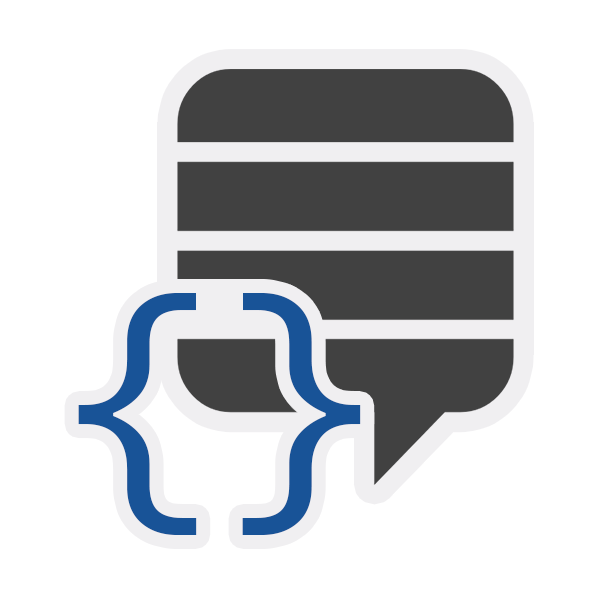
<style>
.page{position:relative;width:600px;height:600px;background:#ffffff}
.page>*{position:absolute;margin:0}
.t1{font:253.5px "Verdana";color:#185397}
</style>
<div class="page">
<p class="t1" style="left:78px;top:293px;width:283px;height:242px;rotate:180deg">{}</p>
</div>
